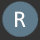
<style>
.page{position:relative;width:40px;height:40px;background:#607b8b}
.page>*{position:absolute;margin:0}
.t1{font:24px "Calibri";color:#fcfbfb}
</style>
<div class="page">
<p class="t1" style="left:15px;top:11px;width:11px;height:16px">R</p>
</div>
